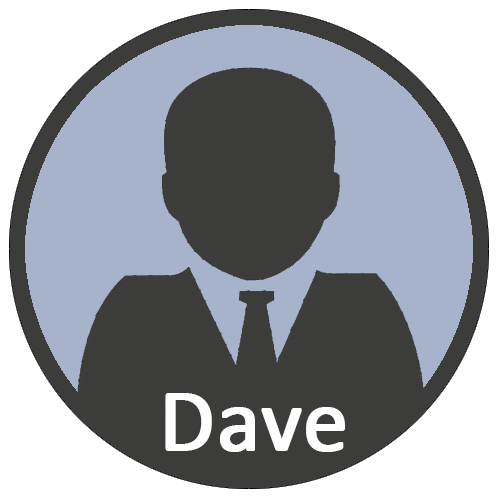
<style>
.page{position:relative;width:500px;height:500px;background:#3c3c3b}
.page>*{position:absolute;margin:0}
.t1{font:90px "Calibri";color:#ffffff;font-weight:bold}
</style>
<div class="page">
<p class="t1" style="left:165px;top:393px;width:180px;height:59px">Dave</p>
</div>
